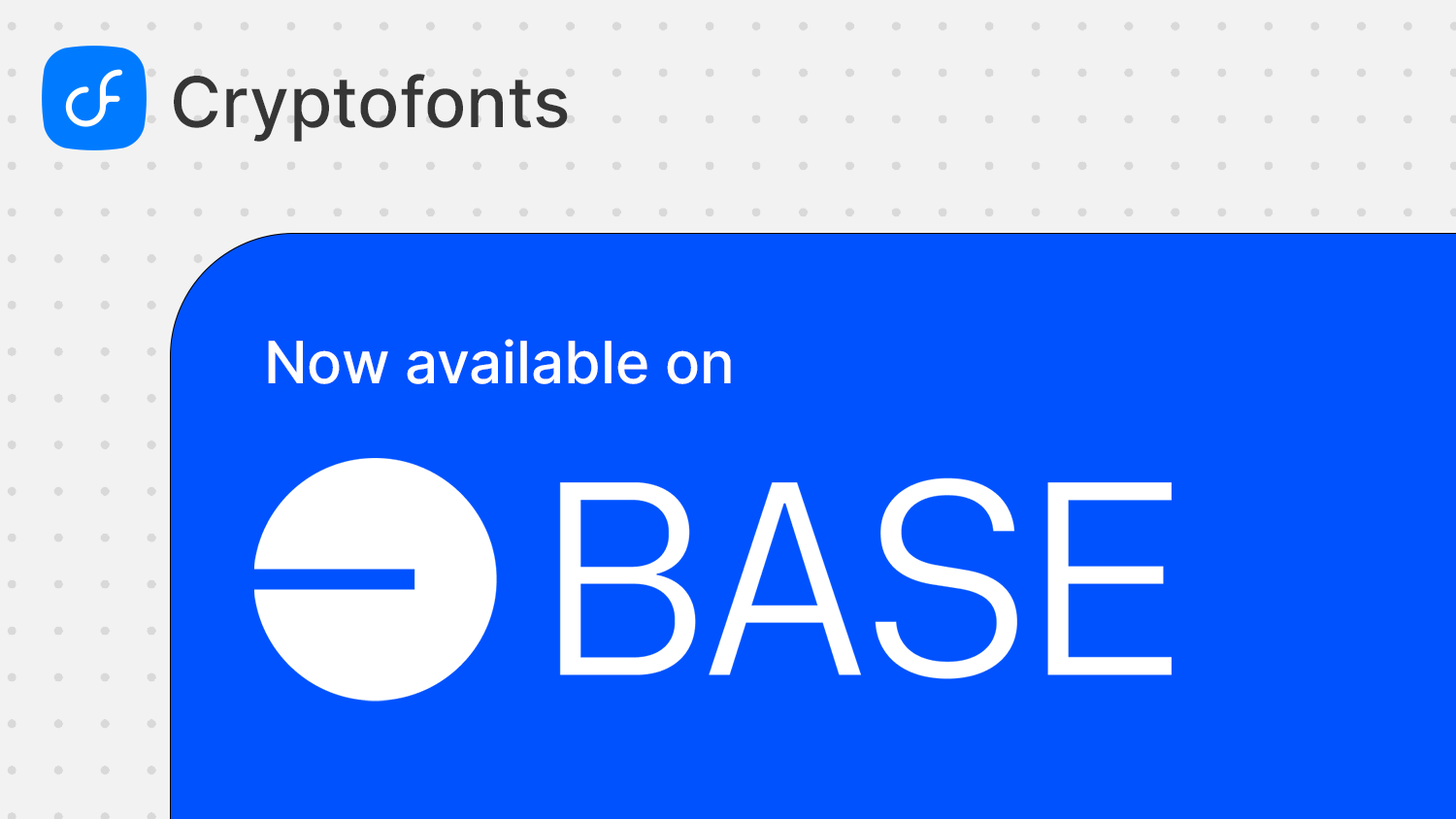
<style>
.page{position:relative;width:1456px;height:819px;background:#0052ff}
.page>*{position:absolute;margin:0}
.t1{font:69.9px "Inter-Medium";color:#363636}
.t2{font:58.2px "Inter-Medium";color:#fffefe}
</style>
<div class="page">
<p class="t1" style="left:174px;top:74px;width:394px;height:68px">Cryptofonts</p>
<p class="t2" style="left:268px;top:339px;width:463px;height:45px">Now available on</p>
</div>
